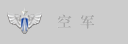
<style>
.page{position:relative;width:128px;height:44px;background:#cccccc}
.page>*{position:absolute;margin:0}
.t1{font:15px "STZhongsong";letter-spacing:-0.04em;color:#a8a7a7}
</style>
<div class="page">
<p class="t1" style="left:57px;top:14px;width:38px;height:15px">空  军</p>
</div>
